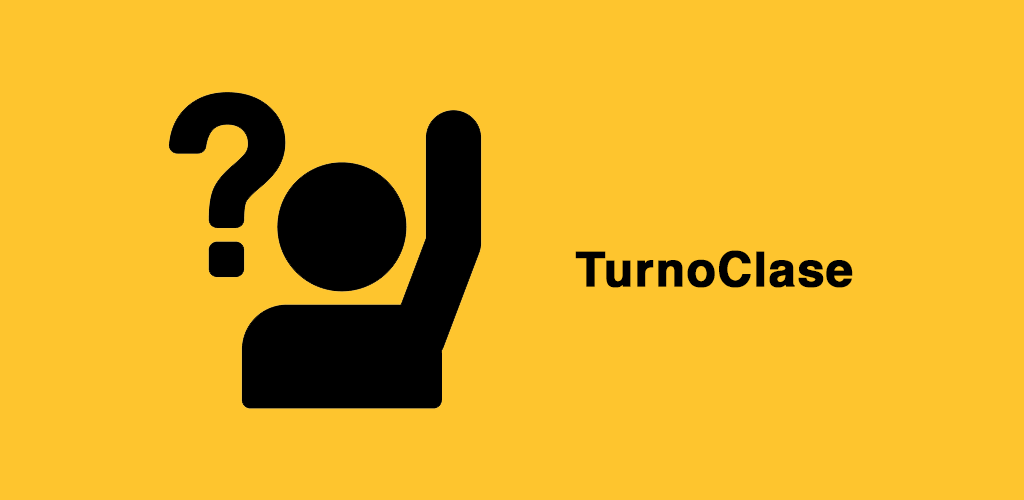
<style>
.page{position:relative;width:1024px;height:500px;background:#fec52e}
.page>*{position:absolute;margin:0}
.t1{font:48px "Helvetica-Bold";letter-spacing:0.01em;color:#000000;font-weight:bold}
</style>
<div class="page">
<p class="t1" style="left:575px;top:250px;width:278px;height:38px">TurnoClase</p>
</div>
